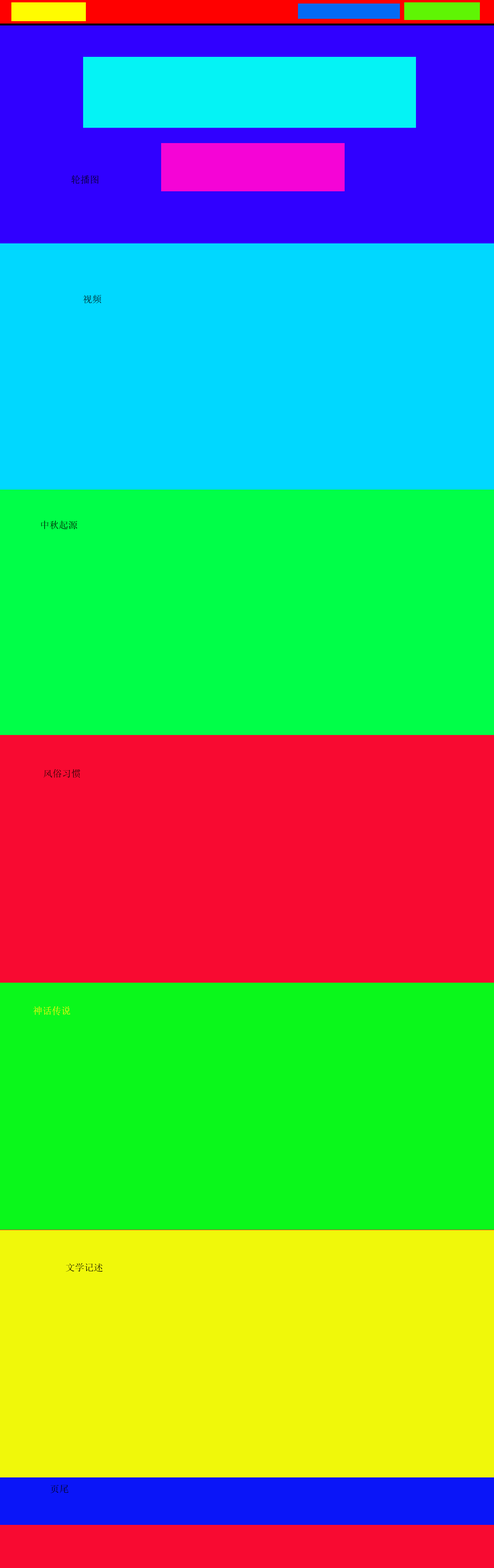
<style>
.page{position:relative;width:494px;height:1568px}
.page>*{position:absolute;margin:0}
.t1{font:9.4px "SimSun";color:#000000}
.t2{font:9.4px "SimSun";color:#030301}
.t3{font:9.4px "SimSun";color:#f0f80a}
</style>
<div class="page">
<p class="t1" style="left:71px;top:175px;width:27px;height:9px">轮播图</p>
<p class="t1" style="left:83px;top:295px;width:18px;height:8px">视频</p>
<p class="t1" style="left:41px;top:521px;width:36px;height:8px">中秋起源</p>
<p class="t2" style="left:44px;top:769px;width:36px;height:9px">风俗习惯</p>
<p class="t3" style="left:33px;top:1006px;width:37px;height:9px">神话传说</p>
<p class="t2" style="left:66px;top:1263px;width:37px;height:9px">文学记述</p>
<p class="t2" style="left:51px;top:1485px;width:18px;height:8px">页尾</p>
</div>
